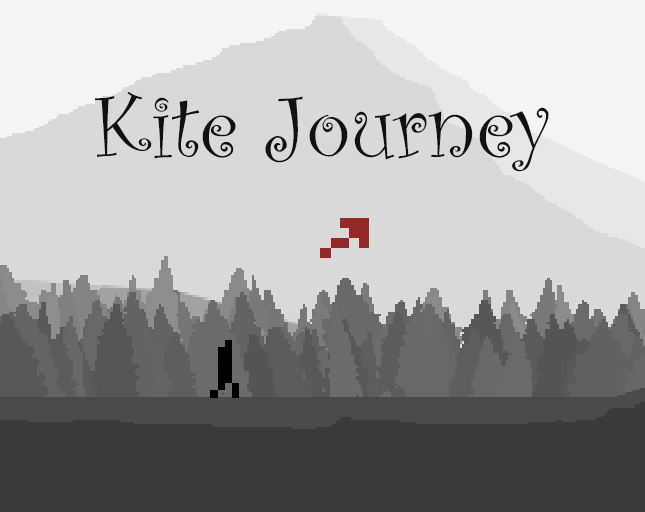
<style>
.page{position:relative;width:645px;height:512px;background:#d9d9d9}
.page>*{position:absolute;margin:0}
.t1{font:92.2px "CurlzMT";color:#111111}
</style>
<div class="page">
<p class="t1" style="left:95px;top:91px;width:454px;height:81px">Kite Journey</p>
</div>
